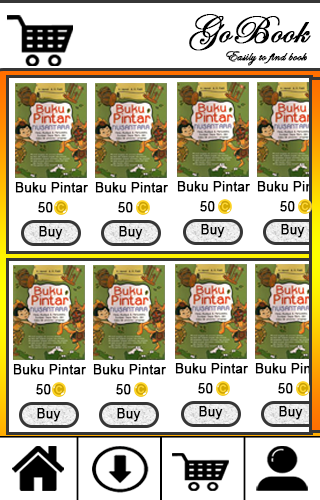
<style>
.page{position:relative;width:320px;height:500px;background:#ffffff}
.page>*{position:absolute;margin:0}
.t1{font:40px "EdwardianScriptITC";color:#000000;font-weight:bold}
.t2{font:14.3px "EdwardianScriptITC";color:#000000;font-weight:bold}
.t3{font:12.7px "ArialMT";color:#000000;font-weight:bold;scale:1.05 1}
.t4{font:13.3px "ArialMT";color:#000000;font-weight:bold}
</style>
<div class="page">
<p class="t1" style="left:189px;top:14px;width:122px;height:37px">GoBook</p>
<p class="t2" style="left:226px;top:51px;width:81px;height:15px">Easily to find book</p>
<p class="t3" style="left:15px;top:182px;width:73px;height:11px">Buku Pintar</p>
<p class="t3" style="left:95px;top:182px;width:73px;height:11px">Buku Pintar</p>
<p class="t3" style="left:177px;top:181px;width:73px;height:11px">Buku Pintar</p>
<p class="t3" style="left:38px;top:202px;width:15px;height:11px">50</p>
<p class="t3" style="left:118px;top:202px;width:15px;height:11px">50</p>
<p class="t3" style="left:200px;top:201px;width:15px;height:11px">50</p>
<p class="t3" style="left:280px;top:201px;width:15px;height:11px">50</p>
<p class="t4" style="left:39px;top:226px;width:24px;height:14px">Buy</p>
<p class="t4" style="left:119px;top:226px;width:24px;height:14px">Buy</p>
<p class="t4" style="left:201px;top:224px;width:24px;height:14px">Buy</p>
<p class="t4" style="left:281px;top:224px;width:24px;height:14px">Buy</p>
<p class="t3" style="left:13px;top:364px;width:73px;height:11px">Buku Pintar</p>
<p class="t3" style="left:93px;top:364px;width:73px;height:11px">Buku Pintar</p>
<p class="t3" style="left:175px;top:363px;width:73px;height:11px">Buku Pintar</p>
<p class="t3" style="left:36px;top:384px;width:15px;height:11px">50</p>
<p class="t3" style="left:116px;top:384px;width:15px;height:11px">50</p>
<p class="t3" style="left:198px;top:383px;width:15px;height:11px">50</p>
<p class="t3" style="left:278px;top:383px;width:15px;height:11px">50</p>
<p class="t4" style="left:37px;top:408px;width:24px;height:14px">Buy</p>
<p class="t4" style="left:117px;top:408px;width:24px;height:14px">Buy</p>
<p class="t4" style="left:199px;top:406px;width:24px;height:14px">Buy</p>
<p class="t4" style="left:279px;top:406px;width:24px;height:14px">Buy</p>
</div>
